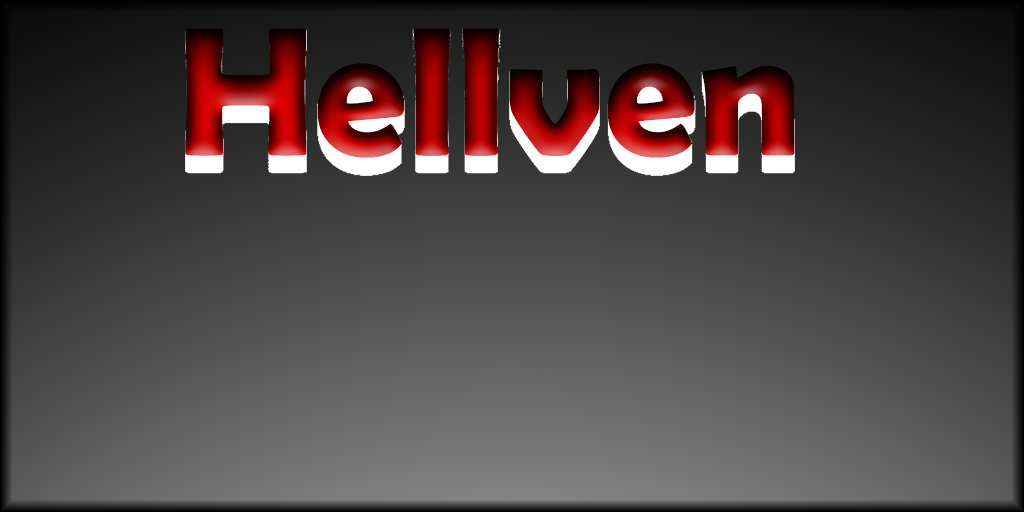
<style>
.page{position:relative;width:1024px;height:512px}
.page>*{position:absolute;margin:0}
.t1{font:184.6px "BerlinSansFBDemi-Bold"}
</style>
<div class="page">
<p class="t1" style="left:185px;top:28px;width:610px;height:130px">Hellven</p>
</div>
